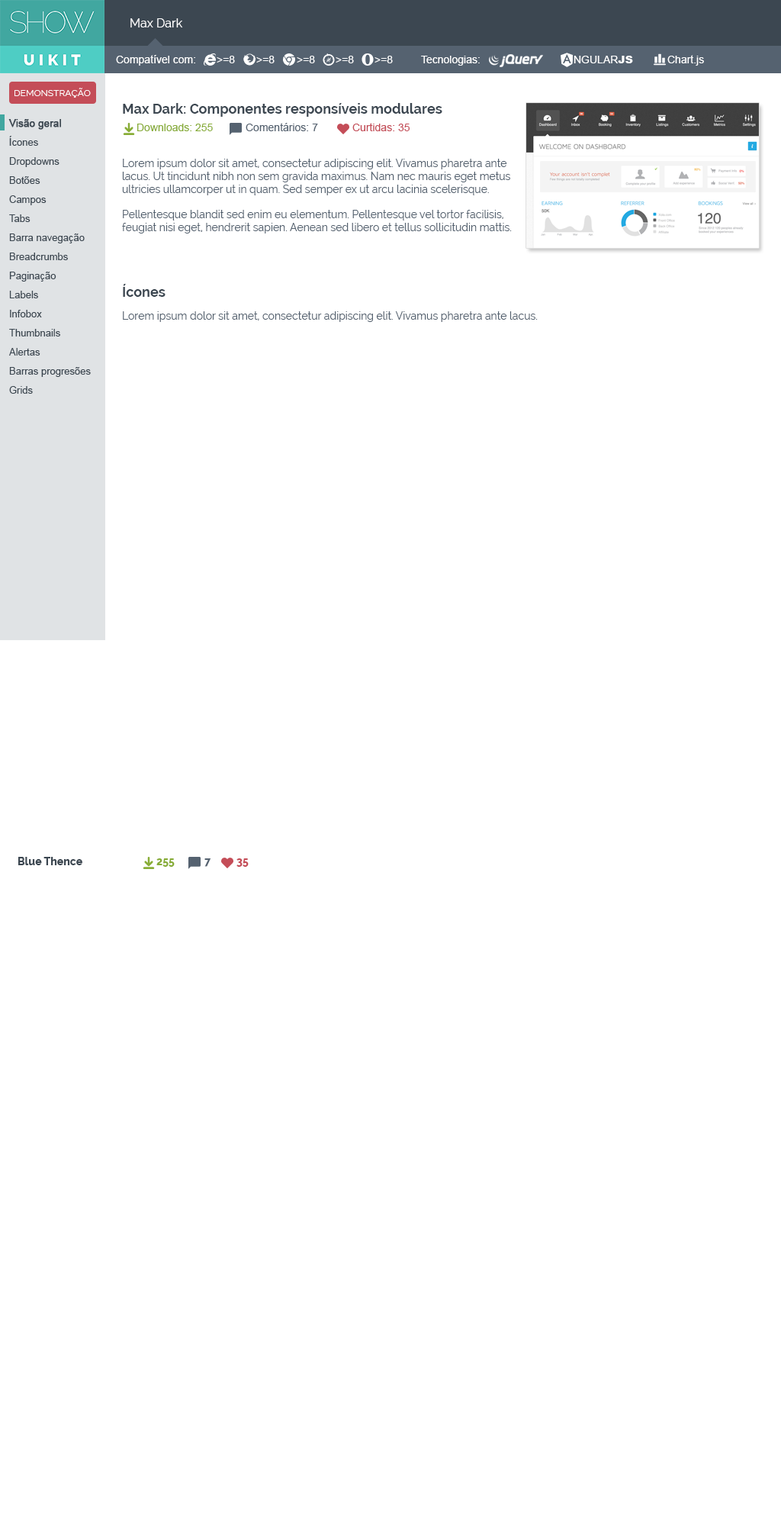
<style>
.page{position:relative;width:781px;height:1526px;background:#ffffff}
.page>*{position:absolute;margin:0}
.t1{font:12.2px "Raleway";color:#ffffff}
.t2{font:10.7px "ArialMT";color:#ffffff}
.t3{font:10.7px "Arial-Black";color:#ffffff}
.t4{font:9.2px "Raleway";color:#ffffff;text-transform:uppercase}
.t5{font:13.7px "Raleway-Bold";color:#3c4751}
.t6{font:9.9px/19.1px "ArialMT";color:#3c4751}
.t7{font:9.9px/19.1px "ArialMT";color:#3c4751;font-weight:bold}
.t8{font:10.7px "ArialMT";color:#87ac37}
.t9{font:10.7px "ArialMT";color:#556270}
.t10{font:10.7px "ArialMT";color:#c44d58}
.t11{font:10.7px "Raleway";color:#556270}
.t12{font:10.7px "Raleway-ExtraBold";color:#3c4751}
.t13{font:10.7px "Raleway-ExtraBold";color:#87ac37}
.t14{font:10.7px "Raleway-ExtraBold";color:#556270}
.t15{font:10.7px "Raleway-ExtraBold";color:#c44d58}
</style>
<div class="page">
<p class="t1" style="left:130px;top:18px;width:53px;height:9px">Max Dark</p>
<p class="t2" style="left:116px;top:55px;width:79px;height:11px">Compatível com:</p>
<p class="t2" style="left:217px;top:56px;width:18px;height:7px">&gt;=8</p>
<p class="t2" style="left:256px;top:56px;width:19px;height:7px">&gt;=8</p>
<p class="t2" style="left:297px;top:56px;width:18px;height:7px">&gt;=8</p>
<p class="t2" style="left:336px;top:56px;width:18px;height:7px">&gt;=8</p>
<p class="t2" style="left:375px;top:56px;width:18px;height:7px">&gt;=8</p>
<p class="t2" style="left:421px;top:56px;width:59px;height:10px">Tecnologias:</p>
<p class="t2" style="left:574px;top:56px;width:59px;height:7px">NGULAR<span class="t3">JS</span></p>
<p class="t2" style="left:668px;top:55px;width:36px;height:11px">Chart.js</p>
<p class="t4" style="left:14px;top:88px;width:77px;height:10px">Demonstração</p>
<p class="t5" style="left:123px;top:103px;width:320px;height:14px">Max Dark: Componentes responsíveis modulares</p>
<p class="t6" style="left:8px;top:119px;width:83px;height:275px"><span class="t7">Visão geral<br></span>Ícones<br>Dropdowns<br>Botões<br>Campos<br>Tabs<br>Barra navegação<br>Breadcrumbs<br>Paginação<br>Labels<br>Infobox<br>Thumbnails<br>Alertas<br>Barras progresões<br>Grids</p>
<p class="t8" style="left:137px;top:124px;width:76px;height:7px">Downloads: 255</p>
<p class="t9" style="left:246px;top:123px;width:72px;height:8px">Comentários: 7</p>
<p class="t10" style="left:353px;top:123px;width:57px;height:8px">Curtidas: 35</p>
<p class="t11" style="left:122px;top:159px;width:390px;height:74px">Lorem ipsum dolor sit amet, consectetur adipiscing elit. Vivamus pharetra ante <br>lacus. Ut tincidunt nibh non sem gravida maximus. Nam nec mauris eget metus <br>ultricies ullamcorper ut in quam. Sed semper ex ut arcu lacinia scelerisque. <br><br>Pellentesque blandit sed enim eu elementum. Pellentesque vel tortor facilisis, <br>feugiat nisi eget, hendrerit sapien. Aenean sed libero et tellus sollicitudin mattis.</p>
<p class="t5" style="left:123px;top:284px;width:43px;height:13px">Ícones</p>
<p class="t11" style="left:123px;top:311px;width:415px;height:11px">Lorem ipsum dolor sit amet, consectetur adipiscing elit. Vivamus pharetra ante lacus.</p>
<p class="t12" style="left:18px;top:857px;width:64px;height:8px">Blue Thence</p>
<p class="t13" style="left:156px;top:858px;width:19px;height:9px">255</p>
<p class="t14" style="left:204px;top:858px;width:7px;height:9px">7</p>
<p class="t15" style="left:237px;top:858px;width:12px;height:9px">35</p>
</div>
